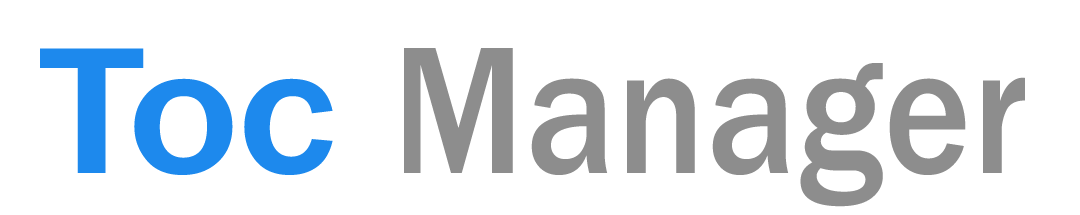
<style>
.page{position:relative;width:1080px;height:215px;background:#ffffff}
.page>*{position:absolute;margin:0}
.t1{font:320.4px "FranklinGothic-Medium";letter-spacing:0.005em;color:#1d89ed;scale:1.14 1}
.t2{font:321.1px "FranklinGothic-Medium";letter-spacing:0.005em;color:#8d8d8d;scale:0.89 1}
</style>
<div class="page">
<p class="t1" style="left:40px;top:48px;width:293px;height:127px">Toc</p>
<p class="t2" style="left:404px;top:48px;width:621px;height:159px">Manager</p>
</div>
